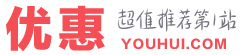
<style>
.page{position:relative;width:250px;height:55px;background:#ffffff}
.page>*{position:absolute;margin:0}
.t1{font:48px "FZLTTHK--GBK1-0";letter-spacing:0.1em;color:#f54e54;text-transform:uppercase}
.t2{font:12px "FZLTTHK--GBK1-0";letter-spacing:0.1em;color:#f54e54;text-transform:uppercase}
</style>
<div class="page">
<p class="t1" style="left:6px;top:5px;width:99px;height:47px">优惠</p>
<p class="t2" style="left:121px;top:38px;width:105px;height:12px">youhui.com</p>
</div>
